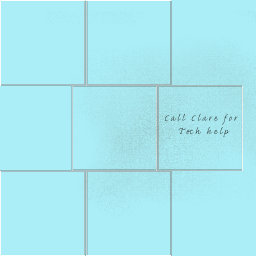
<style>
.page{position:relative;width:256px;height:256px;background:#abeef7}
.page>*{position:absolute;margin:0}
.t1{font:11px "CaflischScriptPro-Regular";letter-spacing:0.205em}
</style>
<div class="page">
<p class="t1" style="left:165px;top:113px;width:73px;height:24px;text-align:center">Call Clare for <br>Tech help</p>
</div>
